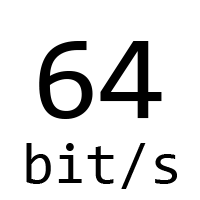
<style>
.page{position:relative;width:200px;height:200px;background:#ffffff}
.page>*{position:absolute;margin:0}
.t1{font:120.8px "Consolas";color:#000000}
.t2{font:58.3px "Consolas";color:#000000}
</style>
<div class="page">
<p class="t1" style="left:39px;top:41px;width:123px;height:78px">64</p>
<p class="t2" style="left:26px;top:143px;width:151px;height:46px">bit/s</p>
</div>
